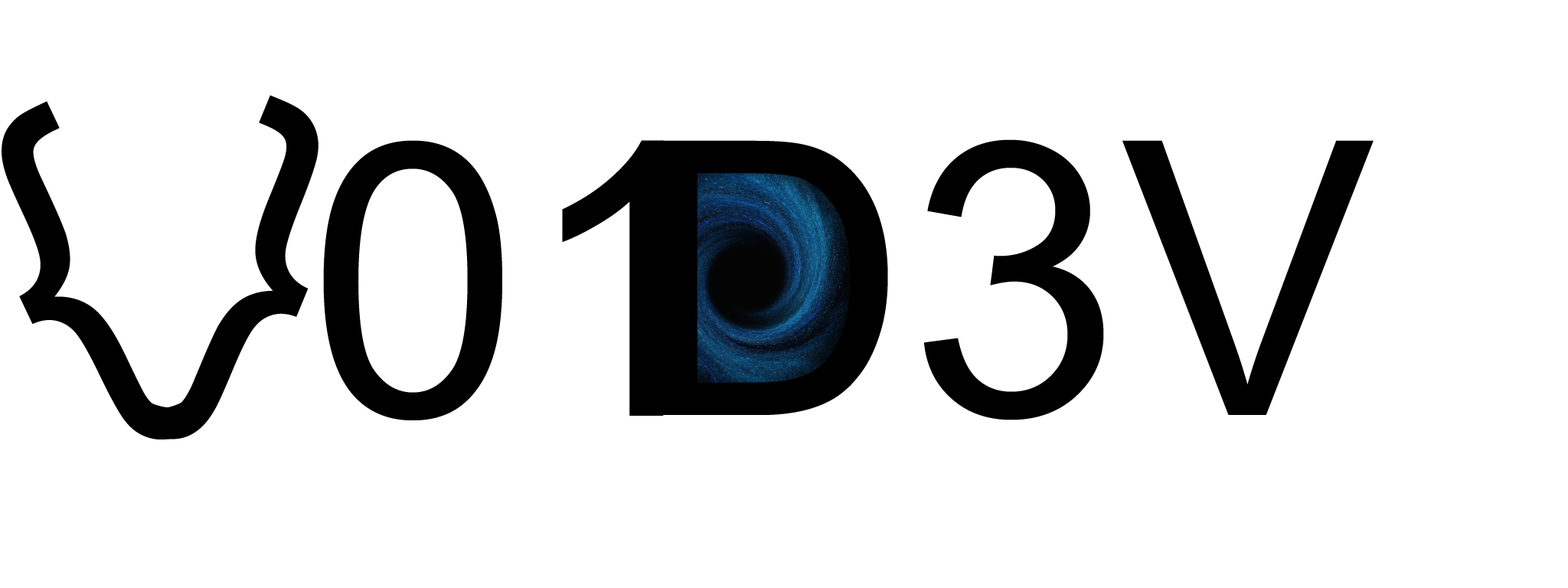
<style>
.page{position:relative;width:1568px;height:588px;background:#ffffff}
.page>*{position:absolute;margin:0}
.t1{font:382.8px "ArialMT";color:#000000}
</style>
<div class="page">
<p class="t1" style="left:2px;top:101px;width:199px;height:338px;rotate:-25deg">{</p>
<p class="t1" style="left:133px;top:95px;width:185px;height:344px;rotate:22deg">}</p>
<p class="t1" style="left:661px;top:139px;width:713px;height:281px">D3V</p>
</div>
